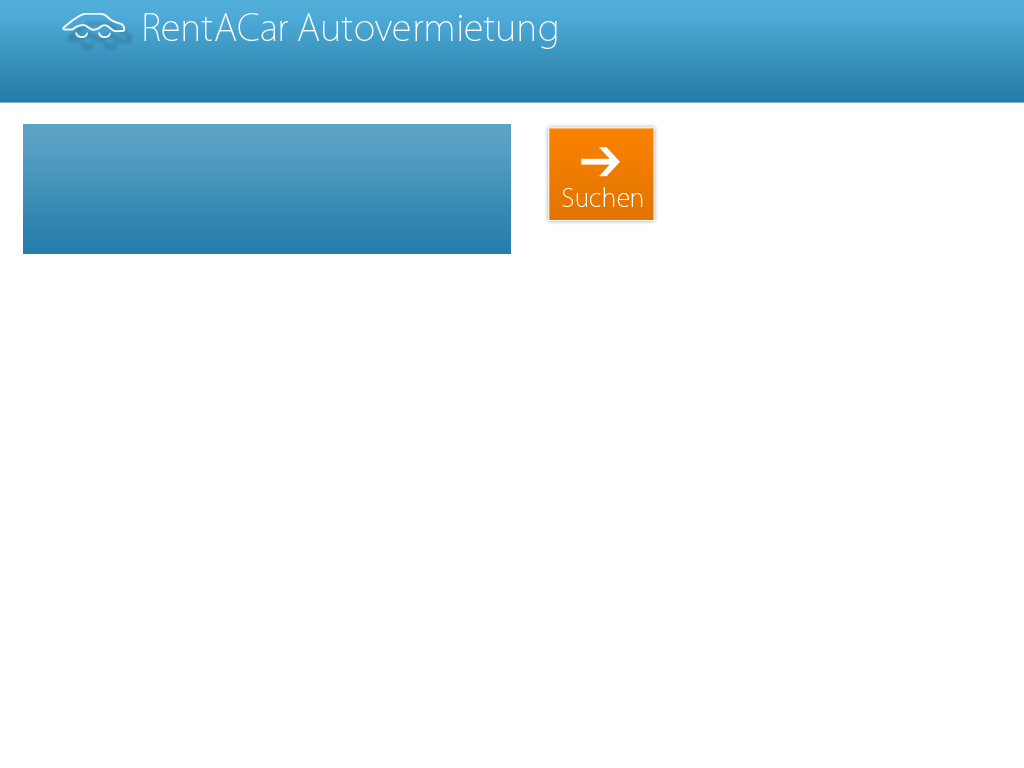
<style>
.page{position:relative;width:1024px;height:768px;background:#ffffff}
.page>*{position:absolute;margin:0}
.t1{font:36px "KozGoPro-ExtraLight";color:#ffffff}
.t2{font:25px "KozGoPro-ExtraLight";color:#ffffff}
</style>
<div class="page">
<p class="t1" style="left:144px;top:13px;width:413px;height:36px">RentACar Autovermietung</p>
<p class="t2" style="left:562px;top:187px;width:81px;height:20px">Suchen</p>
</div>
